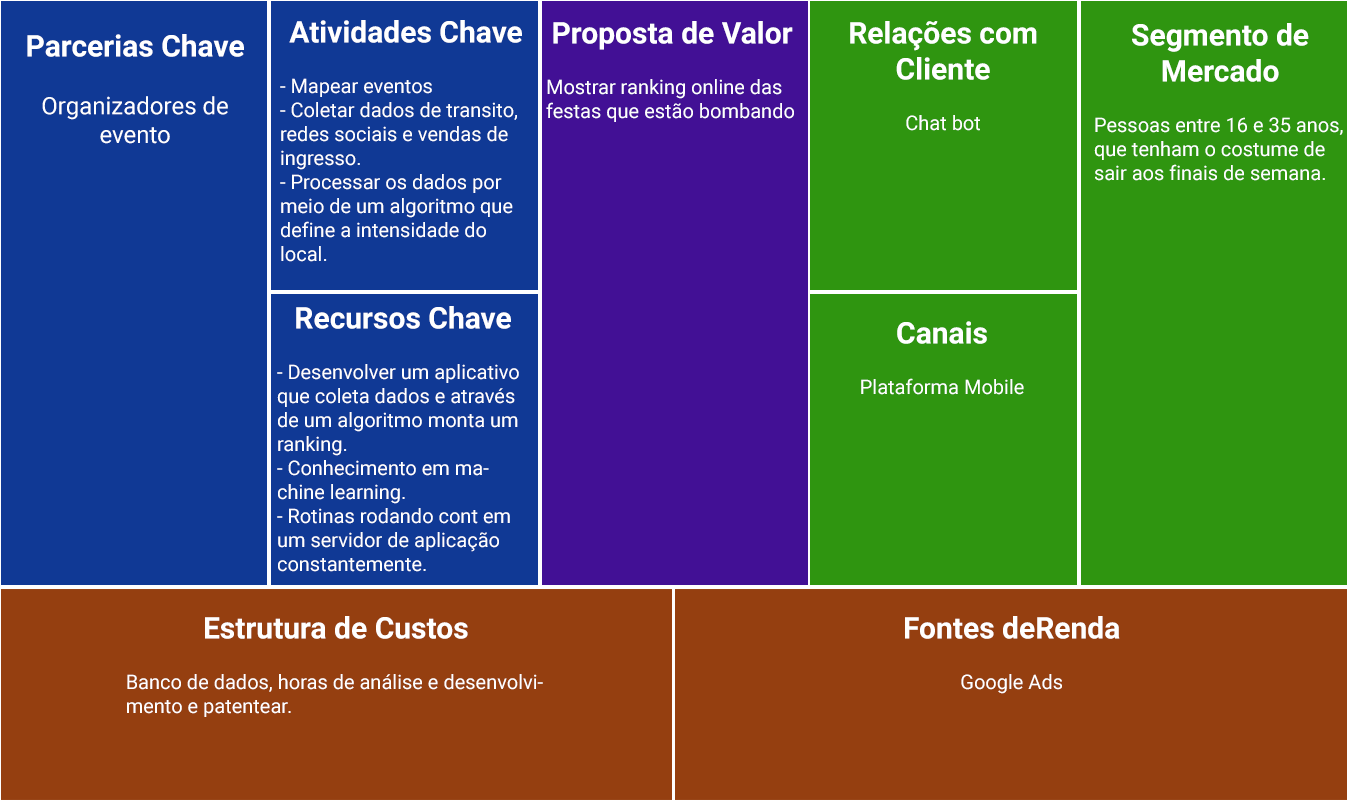
<style>
.page{position:relative;width:1348px;height:801px;background:#2f9510}
.page>*{position:absolute;margin:0}
.t1{font:20px "Roboto-Regular";color:#ffffff}
.t2{font:30px "Roboto-Bold";color:#ffffff}
.t3{font:24px "Roboto-Regular";color:#ffffff}
</style>
<div class="page">
<p class="t1" style="left:280px;top:20px;width:242px;height:242px;text-align:center"><span class="t2">Atividades Chave<br><br></span>- Mapear eventos<br>- Coletar dados de transito, redes sociais e vendas de ingresso.<br>- Processar os dados por meio de um algoritmo que define a intensidade do local.</p>
<p class="t1" style="left:546px;top:21px;width:248px;height:101px;text-align:center"><span class="t2">Proposta de Valor<br><br></span>Mostrar ranking online das festas que estão bombando</p>
<p class="t2" style="left:850px;top:21px;width:187px;height:110px;text-align:center">Relações com <br>Cliente<br><br><span class="t1">Chat bot</span></p>
<p class="t1" style="left:1094px;top:23px;width:249px;height:158px;text-align:center"><span class="t2">Segmento de <br>Mercado<br><br></span>Pessoas entre 16 e 35 anos, que tenham o costume de sair aos finais de semana.</p>
<p class="t3" style="left:27px;top:34px;width:217px;height:110px;text-align:center"><span class="t2">Parcerias Chave<br></span><br>Organizadores de evento</p>
<p class="t1" style="left:277px;top:306px;width:242px;height:266px;text-align:center"><span class="t2">Recursos Chave<br><br></span>- Desenvolver um aplicativo que coleta dados e através de um algoritmo monta um ranking.<br>- Conhecimento em machine learning.<br>- Rotinas rodando cont em um servidor de aplicação constantemente.</p>
<p class="t1" style="left:861px;top:321px;width:163px;height:74px;text-align:center"><span class="t2">Canais<br><br></span>Plataforma Mobile</p>
<p class="t1" style="left:127px;top:616px;width:416px;height:101px;text-align:center"><span class="t2">Estrutura de Custos<br><br></span>Banco de dados, horas de análise e desenvolvimento e patentear.</p>
<p class="t2" style="left:905px;top:616px;width:215px;height:78px;text-align:center">Fontes deRenda<br><br><span class="t1">Google Ads</span></p>
</div>
